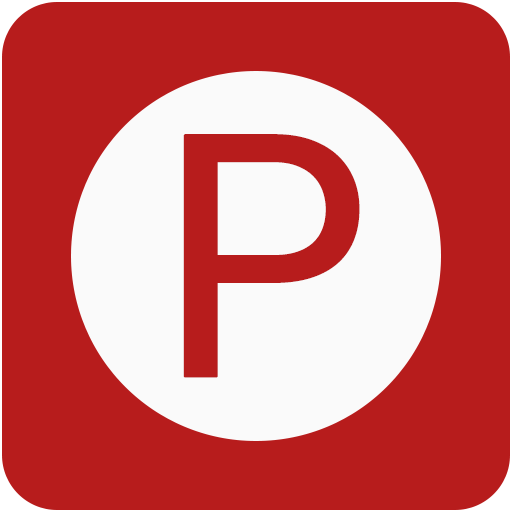
<style>
.page{position:relative;width:512px;height:512px;background:#b71c1c}
.page>*{position:absolute;margin:0}
.t1{font:339.8px "Roboto-Regular";letter-spacing:-0.06em;color:#b71c1c;font-weight:bold}
</style>
<div class="page">
<p class="t1" style="left:183px;top:134px;width:177px;height:244px">P</p>
</div>
